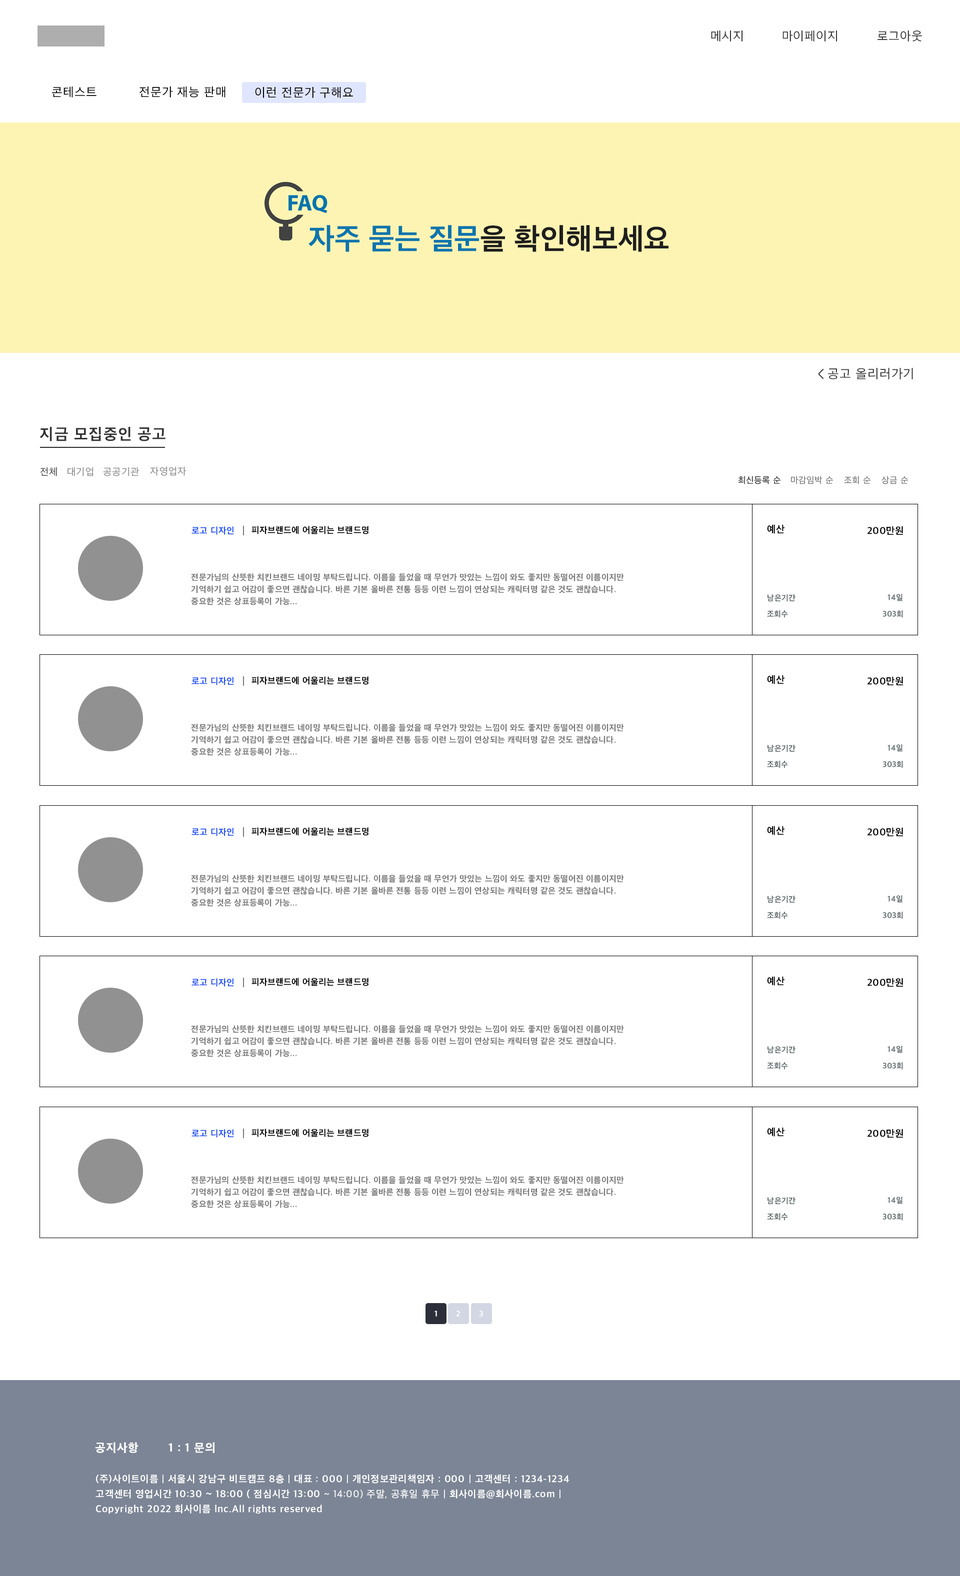
<style>
.page{position:relative;width:960px;height:1576px;background:#ffffff}
.page>*{position:absolute;margin:0}
.t1{font:12.5px "AppleSDGothicNeo-Regular";letter-spacing:0.05em;color:#333333}
.t2{font:12.5px "AppleSDGothicNeo-Regular";letter-spacing:0.05em;color:#000000}
.t3{font:30px "AppleSDGothicNeo-Bold";color:#0c75ad}
.t4{font:30px "AppleSDGothicNeo-Bold";color:#1e1e1e}
.t5{font:13px "AppleSDGothicNeo-Regular";letter-spacing:0.05em;color:#333333}
.t6{font:16px "AppleSDGothicNeo-Bold";letter-spacing:0.05em;color:#333333}
.t7{font:10px "AppleSDGothicNeo-Regular";letter-spacing:0.05em;color:#515151}
.t8{font:10px "AppleSDGothicNeo-Regular";letter-spacing:0.05em;color:#8e8e8e}
.t9{font:10px "AppleSDGothicNeo-Regular";letter-spacing:0.05em;color:#909090}
.t10{font:9px "AppleSDGothicNeo-Regular";letter-spacing:0.03em;color:#212121}
.t11{font:9px "AppleSDGothicNeo-Regular";letter-spacing:0.03em;color:#747474}
.t12{font:9px "AppleSDGothicNeo-Bold";letter-spacing:0.03em;color:#2152f6}
.t13{font:9px "AppleSDGothicNeo-Bold";letter-spacing:0.03em;color:#000000}
.t14{font:10px "AppleSDGothicNeo-Bold";letter-spacing:0.03em;color:#000000}
.t15{font:8.5px/12px "AppleSDGothicNeo-Bold";letter-spacing:0.03em;color:#777777}
.t16{font:8px "AppleSDGothicNeo-Bold";letter-spacing:0.03em;color:#606b6e}
.t17{font:8px "AppleSDGothicNeo-Bold";letter-spacing:0.03em;color:#ffffff}
.t18{font:12px "AppleSDGothicNeo-ExtraBold";letter-spacing:0.05em;color:#ffffff}
.t19{font:10px/15px "AppleSDGothicNeo-Bold";letter-spacing:0.05em;color:#ffffff}
.t20{font:10px/15px "AppleSDGothicNeo-Regular";letter-spacing:0.05em;color:#ffffff}
</style>
<div class="page">
<p class="t1" style="left:711px;top:30px;width:31px;height:12px">메시지</p>
<p class="t1" style="left:782px;top:30px;width:55px;height:12px">마이페이지</p>
<p class="t1" style="left:878px;top:30px;width:44px;height:12px">로그아웃</p>
<p class="t2" style="left:52px;top:86px;width:44px;height:12px">콘테스트</p>
<p class="t2" style="left:139px;top:86px;width:87px;height:12px">전문가 재능 판매</p>
<p class="t2" style="left:255px;top:87px;width:98px;height:11px">이런 전문가 구해요</p>
<p class="t3" style="left:308px;top:225px;width:360px;height:27px">자주 묻는 질문<span class="t4">을 확인해보세요</span></p>
<p class="t5" style="left:828px;top:368px;width:85px;height:12px">공고 올리러가기</p>
<p class="t6" style="left:40px;top:427px;width:126px;height:15px">지금 모집중인 공고</p>
<p class="t7" style="left:40px;top:467px;width:17px;height:9px">전체</p>
<p class="t8" style="left:68px;top:467px;width:26px;height:9px">대기업</p>
<p class="t9" style="left:103px;top:467px;width:36px;height:9px">공공기관</p>
<p class="t9" style="left:150px;top:466px;width:36px;height:10px">자영업자</p>
<p class="t10" style="left:738px;top:476px;width:42px;height:8px">최신등록 순</p>
<p class="t11" style="left:791px;top:476px;width:42px;height:8px">마감임박 순</p>
<p class="t11" style="left:844px;top:476px;width:26px;height:8px">조회 순</p>
<p class="t11" style="left:882px;top:476px;width:26px;height:8px">상금 순</p>
<p class="t12" style="left:192px;top:526px;width:42px;height:9px">로고 디자인</p>
<p class="t13" style="left:252px;top:526px;width:116px;height:8px">피자브랜드에 어울리는 브랜드명</p>
<p class="t14" style="left:767px;top:524px;width:17px;height:10px">예산</p>
<p class="t14" style="left:868px;top:526px;width:35px;height:9px">200만원</p>
<p class="t15" style="left:191px;top:574px;width:433px;height:32px">전문가님의 산뜻한 치킨브랜드 네이밍 부탁드립니다. 이름을 들었을 때 무언가 맛있는 느낌이 와도 좋지만 동떨어진 이름이지만<br>기억하기 쉽고 어감이 좋으면 괜찮습니다. 바른 기본 올바른 전통 등등 이런 느낌이 연상되는 캐릭터명 같은 것도 괜찮습니다.<br>중요한 것은 상표등록이 가능...</p>
<p class="t16" style="left:768px;top:594px;width:28px;height:8px">남은기간</p>
<p class="t16" style="left:888px;top:594px;width:14px;height:8px">14일</p>
<p class="t16" style="left:767px;top:610px;width:21px;height:8px">조회수</p>
<p class="t16" style="left:882px;top:610px;width:21px;height:8px">303회</p>
<p class="t12" style="left:192px;top:677px;width:42px;height:9px">로고 디자인</p>
<p class="t13" style="left:252px;top:676px;width:116px;height:9px">피자브랜드에 어울리는 브랜드명</p>
<p class="t14" style="left:767px;top:675px;width:17px;height:9px">예산</p>
<p class="t14" style="left:868px;top:676px;width:35px;height:10px">200만원</p>
<p class="t15" style="left:191px;top:724px;width:433px;height:32px">전문가님의 산뜻한 치킨브랜드 네이밍 부탁드립니다. 이름을 들었을 때 무언가 맛있는 느낌이 와도 좋지만 동떨어진 이름이지만<br>기억하기 쉽고 어감이 좋으면 괜찮습니다. 바른 기본 올바른 전통 등등 이런 느낌이 연상되는 캐릭터명 같은 것도 괜찮습니다.<br>중요한 것은 상표등록이 가능...</p>
<p class="t16" style="left:768px;top:745px;width:28px;height:7px">남은기간</p>
<p class="t16" style="left:888px;top:744px;width:14px;height:8px">14일</p>
<p class="t16" style="left:767px;top:761px;width:21px;height:7px">조회수</p>
<p class="t16" style="left:882px;top:761px;width:21px;height:7px">303회</p>
<p class="t12" style="left:192px;top:828px;width:42px;height:8px">로고 디자인</p>
<p class="t13" style="left:252px;top:828px;width:116px;height:8px">피자브랜드에 어울리는 브랜드명</p>
<p class="t14" style="left:767px;top:826px;width:17px;height:10px">예산</p>
<p class="t14" style="left:868px;top:828px;width:35px;height:8px">200만원</p>
<p class="t15" style="left:191px;top:875px;width:433px;height:32px">전문가님의 산뜻한 치킨브랜드 네이밍 부탁드립니다. 이름을 들었을 때 무언가 맛있는 느낌이 와도 좋지만 동떨어진 이름이지만<br>기억하기 쉽고 어감이 좋으면 괜찮습니다. 바른 기본 올바른 전통 등등 이런 느낌이 연상되는 캐릭터명 같은 것도 괜찮습니다.<br>중요한 것은 상표등록이 가능...</p>
<p class="t16" style="left:768px;top:896px;width:28px;height:8px">남은기간</p>
<p class="t16" style="left:888px;top:896px;width:14px;height:7px">14일</p>
<p class="t16" style="left:767px;top:912px;width:21px;height:8px">조회수</p>
<p class="t16" style="left:882px;top:912px;width:21px;height:8px">303회</p>
<p class="t14" style="left:767px;top:976px;width:17px;height:10px">예산</p>
<p class="t12" style="left:192px;top:978px;width:42px;height:9px">로고 디자인</p>
<p class="t13" style="left:252px;top:978px;width:116px;height:8px">피자브랜드에 어울리는 브랜드명</p>
<p class="t14" style="left:868px;top:978px;width:35px;height:9px">200만원</p>
<p class="t15" style="left:191px;top:1026px;width:433px;height:32px">전문가님의 산뜻한 치킨브랜드 네이밍 부탁드립니다. 이름을 들었을 때 무언가 맛있는 느낌이 와도 좋지만 동떨어진 이름이지만<br>기억하기 쉽고 어감이 좋으면 괜찮습니다. 바른 기본 올바른 전통 등등 이런 느낌이 연상되는 캐릭터명 같은 것도 괜찮습니다.<br>중요한 것은 상표등록이 가능...</p>
<p class="t16" style="left:768px;top:1046px;width:28px;height:8px">남은기간</p>
<p class="t16" style="left:888px;top:1046px;width:14px;height:8px">14일</p>
<p class="t16" style="left:767px;top:1062px;width:21px;height:8px">조회수</p>
<p class="t16" style="left:882px;top:1062px;width:21px;height:8px">303회</p>
<p class="t12" style="left:192px;top:1130px;width:42px;height:8px">로고 디자인</p>
<p class="t13" style="left:252px;top:1129px;width:116px;height:9px">피자브랜드에 어울리는 브랜드명</p>
<p class="t14" style="left:767px;top:1128px;width:17px;height:9px">예산</p>
<p class="t14" style="left:868px;top:1129px;width:35px;height:9px">200만원</p>
<p class="t15" style="left:191px;top:1176px;width:433px;height:32px">전문가님의 산뜻한 치킨브랜드 네이밍 부탁드립니다. 이름을 들었을 때 무언가 맛있는 느낌이 와도 좋지만 동떨어진 이름이지만<br>기억하기 쉽고 어감이 좋으면 괜찮습니다. 바른 기본 올바른 전통 등등 이런 느낌이 연상되는 캐릭터명 같은 것도 괜찮습니다.<br>중요한 것은 상표등록이 가능...</p>
<p class="t16" style="left:768px;top:1198px;width:28px;height:7px">남은기간</p>
<p class="t16" style="left:888px;top:1197px;width:14px;height:7px">14일</p>
<p class="t16" style="left:767px;top:1214px;width:21px;height:7px">조회수</p>
<p class="t16" style="left:882px;top:1214px;width:21px;height:7px">303회</p>
<p class="t17" style="left:434px;top:1311px;width:3px;height:6px">1</p>
<p class="t17" style="left:456px;top:1311px;width:4px;height:6px">2</p>
<p class="t17" style="left:479px;top:1311px;width:4px;height:6px">3</p>
<p class="t18" style="left:95px;top:1442px;width:43px;height:12px">공지사항</p>
<p class="t18" style="left:168px;top:1442px;width:46px;height:12px">1 : 1 문의</p>
<p class="t19" style="left:96px;top:1474px;width:473px;height:40px">(주)사이트이름 | 서울시 강남구 비트캠프 8층 | 대표 : 000 | 개인정보관리책임자 : 000 | 고객센터 : 1234-1234<br>고객센터 영업시간 10:30 ~ 18:00 ( 점심시간 13:00<span class="t20"> ~ 14:00) 주말, 공휴일 휴무</span> | 회사이름@회사이름.com | <br>Copyright 2022 회사이름 lnc.All rights reserved</p>
</div>
